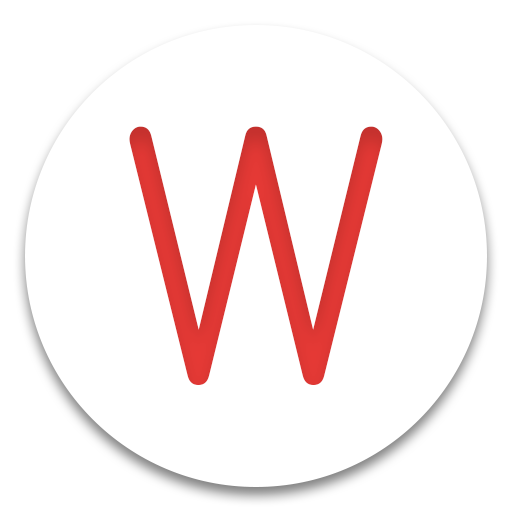
<style>
.page{position:relative;width:512px;height:512px;background:#ffffff}
.page>*{position:absolute;margin:0}
.t1{font:375px "Bariol-Regular";letter-spacing:0.05em;color:#e53935;scale:0.87 1}
</style>
<div class="page">
<p class="t1" style="left:129px;top:126px;width:254px;height:259px">W</p>
</div>
